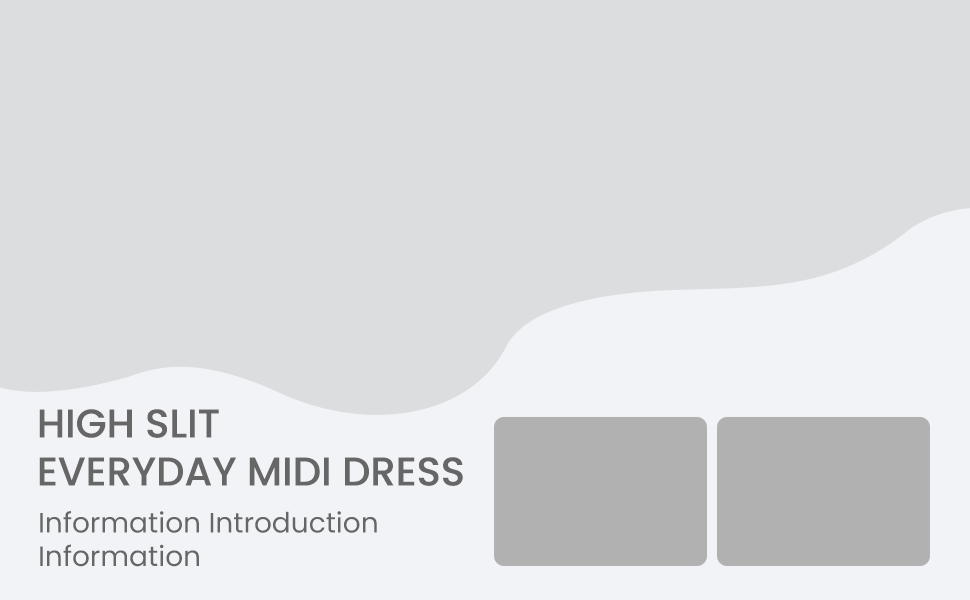
<style>
.page{position:relative;width:970px;height:600px;background:#dcdddf}
.page>*{position:absolute;margin:0}
.t1{font:40px "Poppins-Medium";color:#666666}
.t2{font:28px "Poppins-Regular";color:#666666}
</style>
<div class="page">
<p class="t1" style="left:39px;top:409px;width:424px;height:77px">HIGH SLIT<br>EVERYDAY MIDI DRESS</p>
<p class="t2" style="left:40px;top:511px;width:337px;height:56px">Information Introduction<br>Information</p>
</div>
